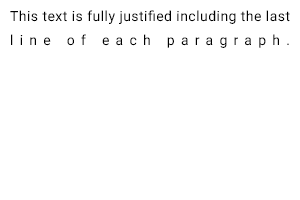
<style>
.page{position:relative;width:300px;height:200px;background:#ffffff}
.page>*{position:absolute;margin:0}
.t1{font:14px "Roboto-Regular";color:#000000}
</style>
<div class="page">
<p class="t1" style="left:10px;top:10px;width:280px;height:38px;text-align:justify">This text is fully justified including the last line of each paragraph.</p>
</div>
